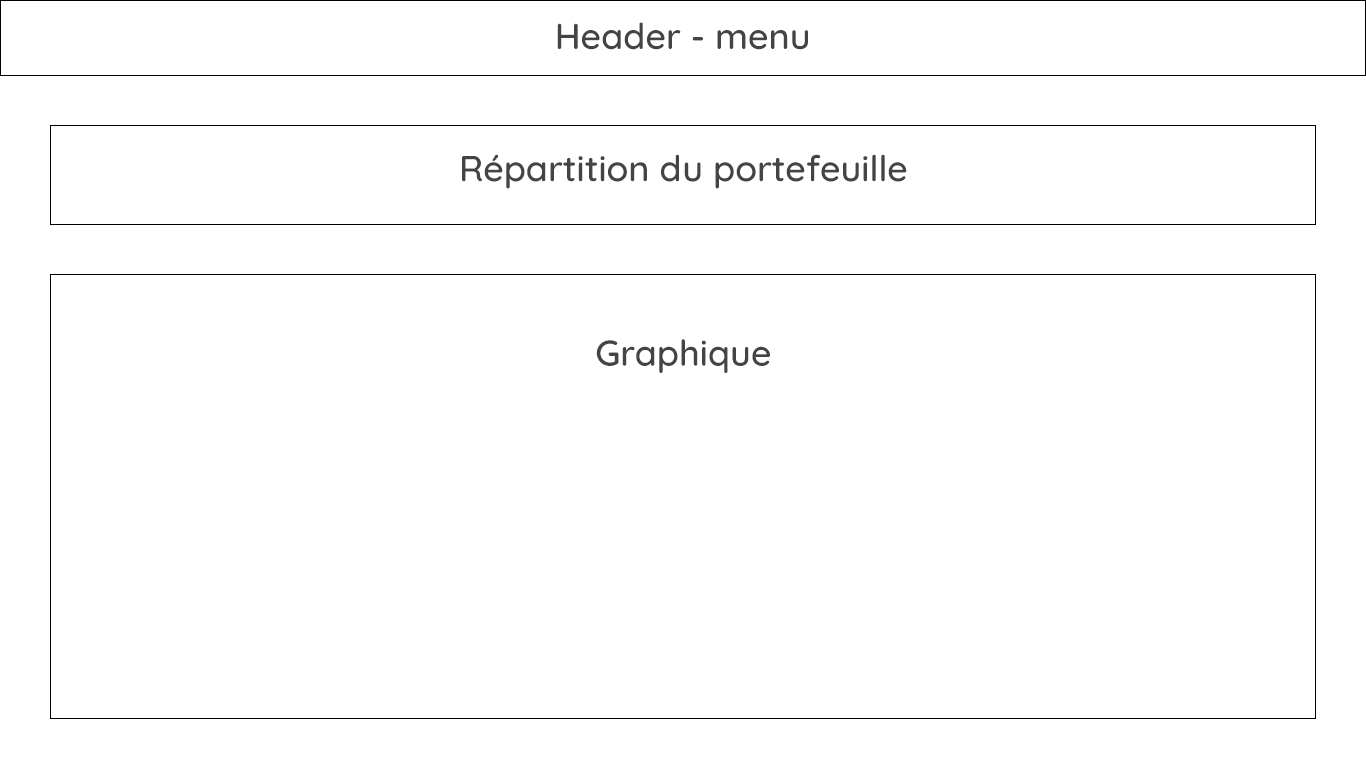
<style>
.page{position:relative;width:1366px;height:768px;background:#ffffff}
.page>*{position:absolute;margin:0}
.t1{font:36px "Quicksand-Medium";color:#444444}
</style>
<div class="page">
<p class="t1" style="left:557px;top:22px;width:251px;height:28px">Header - menu</p>
<p class="t1" style="left:462px;top:154px;width:445px;height:35px">Répartition du portefeuille</p>
<p class="t1" style="left:596px;top:339px;width:174px;height:34px">Graphique</p>
</div>
